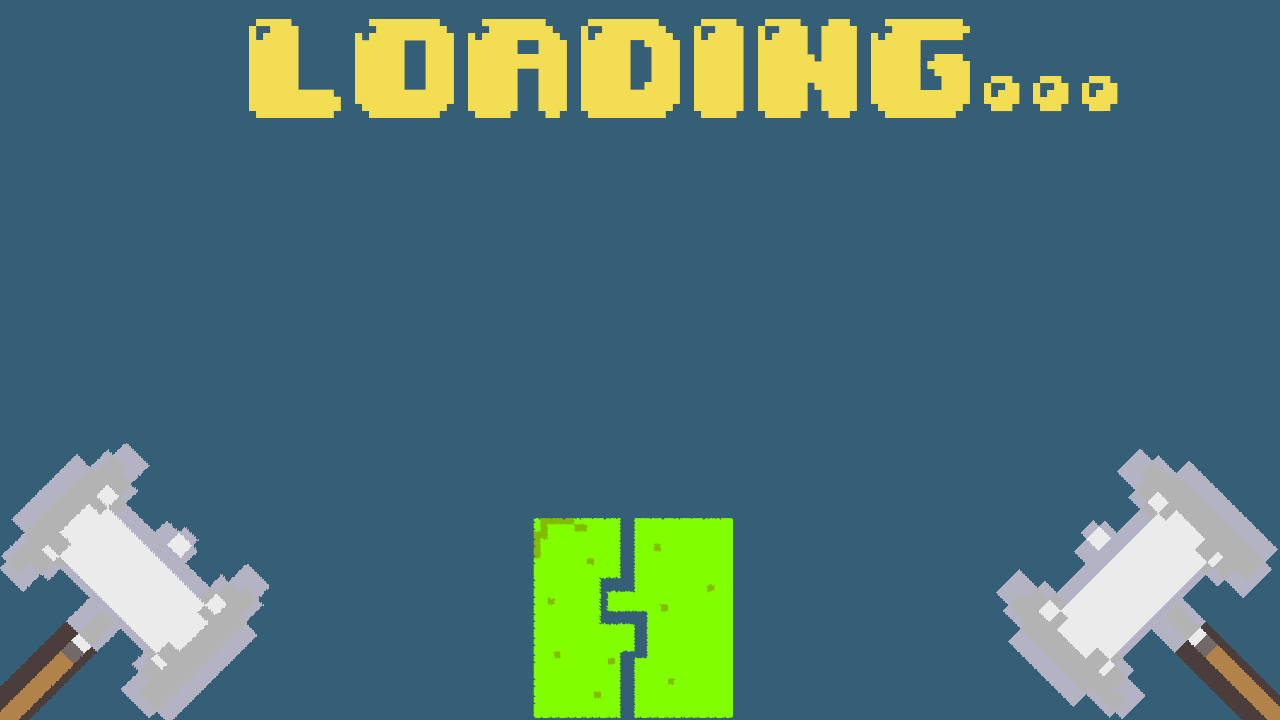
<style>
.page{position:relative;width:1280px;height:720px;background:#355f76}
.page>*{position:absolute;margin:0}
.t1{font:120px "04b30";color:#f2dd53}
</style>
<div class="page">
<p class="t1" style="left:249px;top:19px;width:869px;height:99px">LOADING...</p>
</div>
